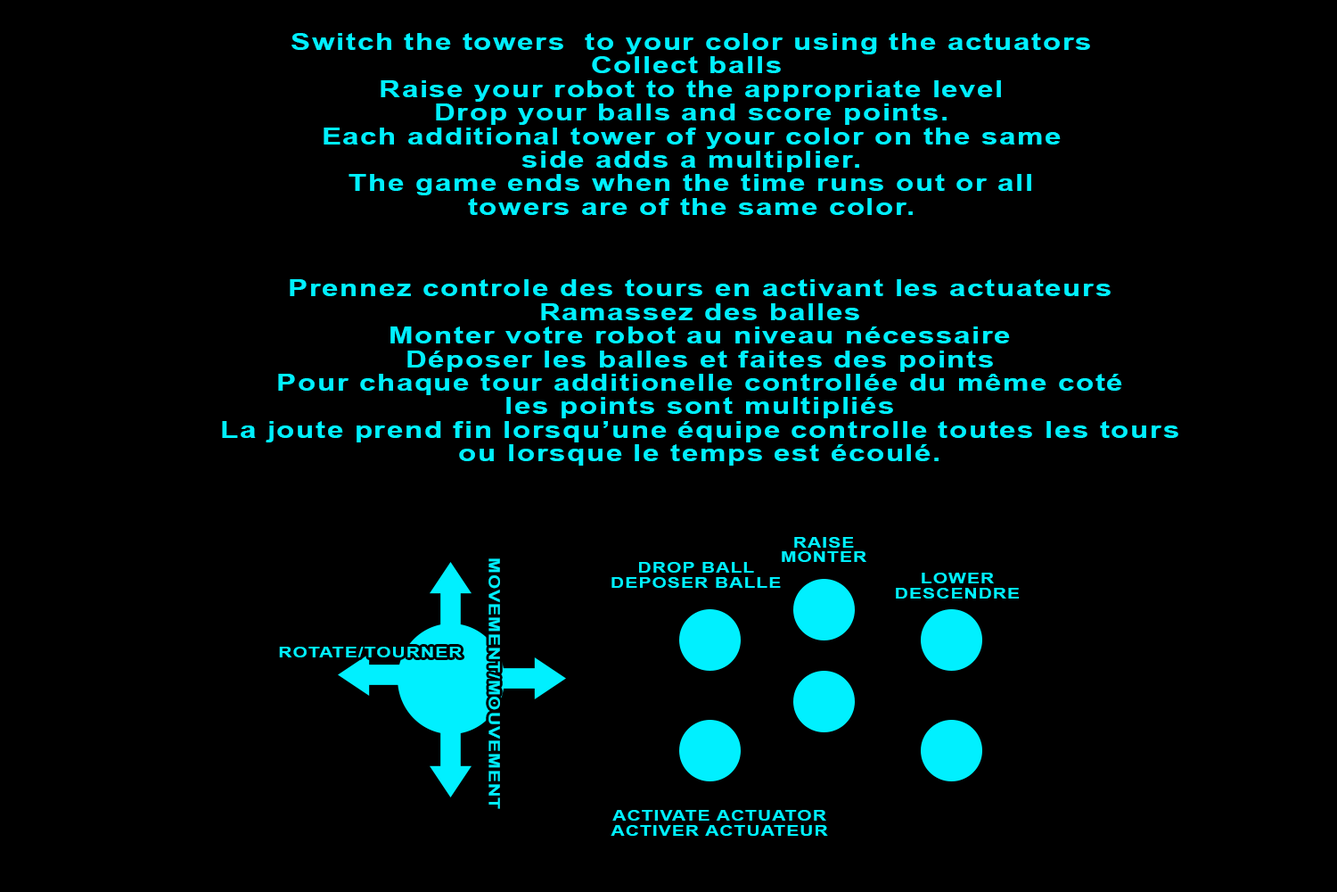
<style>
.page{position:relative;width:1337px;height:892px;background:#000000}
.page>*{position:absolute;margin:0}
.t1{font:23.5px "Arial-BoldMT";letter-spacing:0.05em;color:#00f0ff;scale:1.25 1}
.t2{font:15px "Arial-BoldMT";letter-spacing:0.05em;color:#00f0ff;scale:1.25 1}
.t3{font:15.2px "Arial-BoldMT";letter-spacing:0.05em;color:#00f0ff;scale:1.24 1}
</style>
<div class="page">
<p class="t1" style="left:292px;top:33px;width:798px;height:182px;text-align:center">Switch the towers  to your color using the actuators<br>Collect balls <br>Raise your robot to the appropriate level<br>Drop your balls and score points.<br>Each additional tower of your color on the same<br>side adds a multiplier.<br>The game ends when the time runs out or all<br>towers are of the same color.</p>
<p class="t1" style="left:222px;top:279px;width:957px;height:186px;text-align:center">Prennez controle des tours en activant les actuateurs<br>Ramassez des balles<br>Monter votre robot au niveau nécessaire<br>Déposer les balles et faites des points<br>Pour chaque tour additionelle controllée du même coté<br>les points sont multipliés<br>La joute prend fin lorsqu’une équipe controlle toutes les tours<br>ou lorsque le temps est écoulé.</p>
<p class="t2" style="left:782px;top:537px;width:85px;height:25px;text-align:center">RAISE<br>MONTER</p>
<p class="t3" style="left:489px;top:558px;width:11px;height:251px;rotate:90deg">MOVEMENT/MOUVEMENT</p>
<p class="t2" style="left:612px;top:562px;width:169px;height:26px;text-align:center">DROP BALL<br>DEPOSER BALLE</p>
<p class="t2" style="left:896px;top:572px;width:123px;height:26px;text-align:center">LOWER<br>DESCENDRE</p>
<p class="t2" style="left:279px;top:646px;width:184px;height:11px">ROTATE/TOURNER</p>
<p class="t2" style="left:611px;top:810px;width:217px;height:25px;text-align:center">ACTIVATE ACTUATOR<br>ACTIVER ACTUATEUR</p>
</div>
